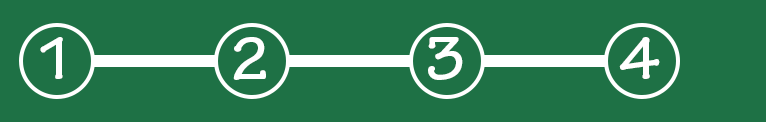
<style>
.page{position:relative;width:766px;height:122px;background:#1e7145}
.page>*{position:absolute;margin:0}
.t1{font:64px "TektonPro-Bold";color:#ffffff}
</style>
<div class="page">
<p class="t1" style="left:40px;top:37px;width:23px;height:42px">1</p>
<p class="t1" style="left:233px;top:37px;width:33px;height:43px">2</p>
<p class="t1" style="left:428px;top:37px;width:35px;height:43px">3</p>
<p class="t1" style="left:619px;top:37px;width:41px;height:42px">4</p>
</div>
